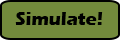
<style>
.page{position:relative;width:120px;height:40px;background:#738a3c}
.page>*{position:absolute;margin:0}
.t1{font:18.5px "ErasITC-Bold";color:#000000}
</style>
<div class="page">
<p class="t1" style="left:15px;top:12px;width:88px;height:13px">Simulate!</p>
</div>
